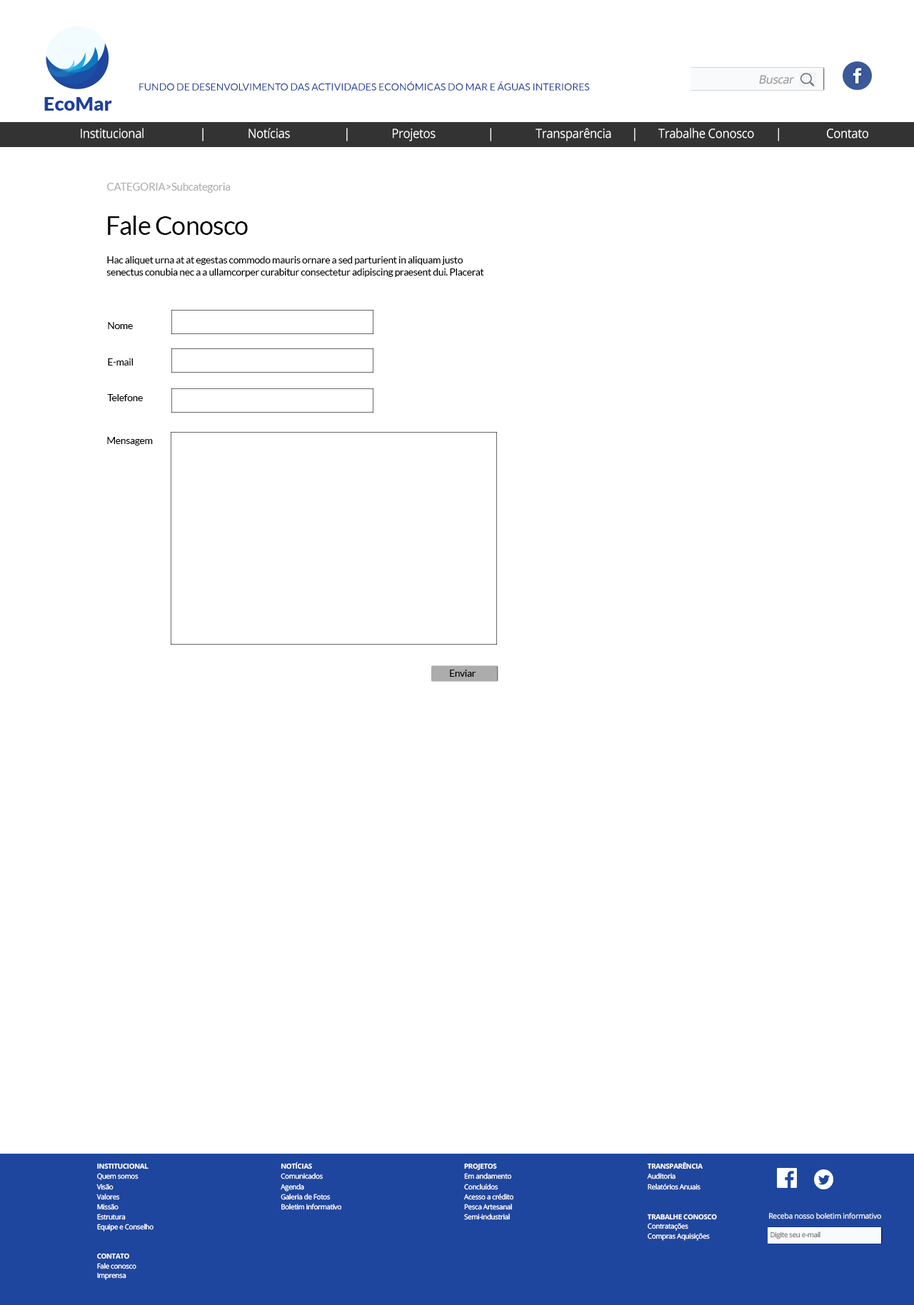
<style>
.page{position:relative;width:914px;height:1305px;background:#ffffff}
.page>*{position:absolute;margin:0}
.t1{font:11.4px "OpenSans-Regular";letter-spacing:-0.025em;color:#979696;font-style:italic}
.t2{font:10px "Lato-Regular";color:#21409a;text-transform:uppercase}
.t3{font:12.8px "OpenSans-Regular";letter-spacing:-0.025em;color:#ffffff;scale:0.93 1}
.t4{font:11px "Lato-Regular";letter-spacing:-0.025em;color:#acacac}
.t5{font:25.7px "Lato-Regular";letter-spacing:-0.025em;color:#000000}
.t6{font:10px "Lato-Regular";letter-spacing:-0.025em;color:#000000}
.t7{font:6.9px/9.8px "OpenSans-Regular";letter-spacing:-0.025em;color:#ffffff}
.t8{font:6.9px/9.8px "OpenSans-Bold";letter-spacing:-0.025em;color:#ffffff}
.t9{font:7.5px "OpenSans-Regular";letter-spacing:-0.025em;color:#ffffff}
.t10{font:6.9px "OpenSans-Regular";letter-spacing:-0.025em;color:#7b7b7b}
</style>
<div class="page">
<p class="t1" style="left:759px;top:75px;width:36px;height:9px">Buscar</p>
<p class="t2" style="left:139px;top:81px;width:451px;height:10px">Fundo de Desenvolvimento das Actividades Económicas do Mar e Águas Interiores</p>
<p class="t3" style="left:81px;top:128px;width:787px;height:13px">Institucional    |  Notícias    |  Projetos    |   Transparência  |   Trabalhe Conosco  |   Contato</p>
<p class="t4" style="left:107px;top:183px;width:123px;height:10px">CATEGORIA&gt;Subcategoria</p>
<p class="t5" style="left:108px;top:216px;width:140px;height:19px">Fale Conosco</p>
<p class="t6" style="left:106px;top:256px;width:378px;height:21px">Hac aliquet urna at at egestas commodo mauris ornare a sed parturient in aliquam justo senectus conubia nec a a ullamcorper curabitur consectetur adipiscing praesent dui. Placerat</p>
<p class="t6" style="left:107px;top:322px;width:36px;height:79px">Nome<br><br><br>E-mail<br><br><br>Telefone</p>
<p class="t6" style="left:107px;top:437px;width:46px;height:8px">Mensagem</p>
<p class="t6" style="left:450px;top:670px;width:26px;height:7px">Enviar</p>
<p class="t7" style="left:96px;top:1163px;width:57px;height:117px"><span class="t8">INSTITUCIONAL<br></span>Quem somos<br>Visão<br>Valores<br>Missão<br>Estrutura<br>Equipe e Conselho<br><br><br><span class="t8">CONTATO <br></span>Fale conosco<br>Imprensa</p>
<p class="t7" style="left:281px;top:1161px;width:60px;height:49px"><span class="t8">NOTÍCIAS<br></span>Comunicados<br>Agenda<br>Galeria de Fotos<br>Boletim informativo</p>
<p class="t7" style="left:464px;top:1163px;width:49px;height:57px"><span class="t8">PROJETOS<br></span>Em andamento<br>Concluídos<br>Acesso a crédito<br>Pesca Artesanal<br>Semi-industrial</p>
<p class="t7" style="left:647px;top:1161px;width:70px;height:80px"><span class="t8">TRANSPARÊNCIA<br></span>Auditoria<br>Relatórios Anuais<br><br><br><span class="t8">TRABALHE CONOSCO<br></span>Contratações<br>Compras Aquisições</p>
<p class="t9" style="left:769px;top:1212px;width:112px;height:7px">Receba nosso boletim informativo</p>
<p class="t10" style="left:770px;top:1231px;width:50px;height:8px">Digite seu e-mail</p>
</div>
